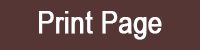
<style>
.page{position:relative;width:200px;height:50px;background:#563635}
.page>*{position:absolute;margin:0}
.t1{font:30.6px "ArialNarrow";color:#ffffff;font-weight:bold}
</style>
<div class="page">
<p class="t1" style="left:39px;top:11px;width:123px;height:29px">Print Page</p>
</div>
